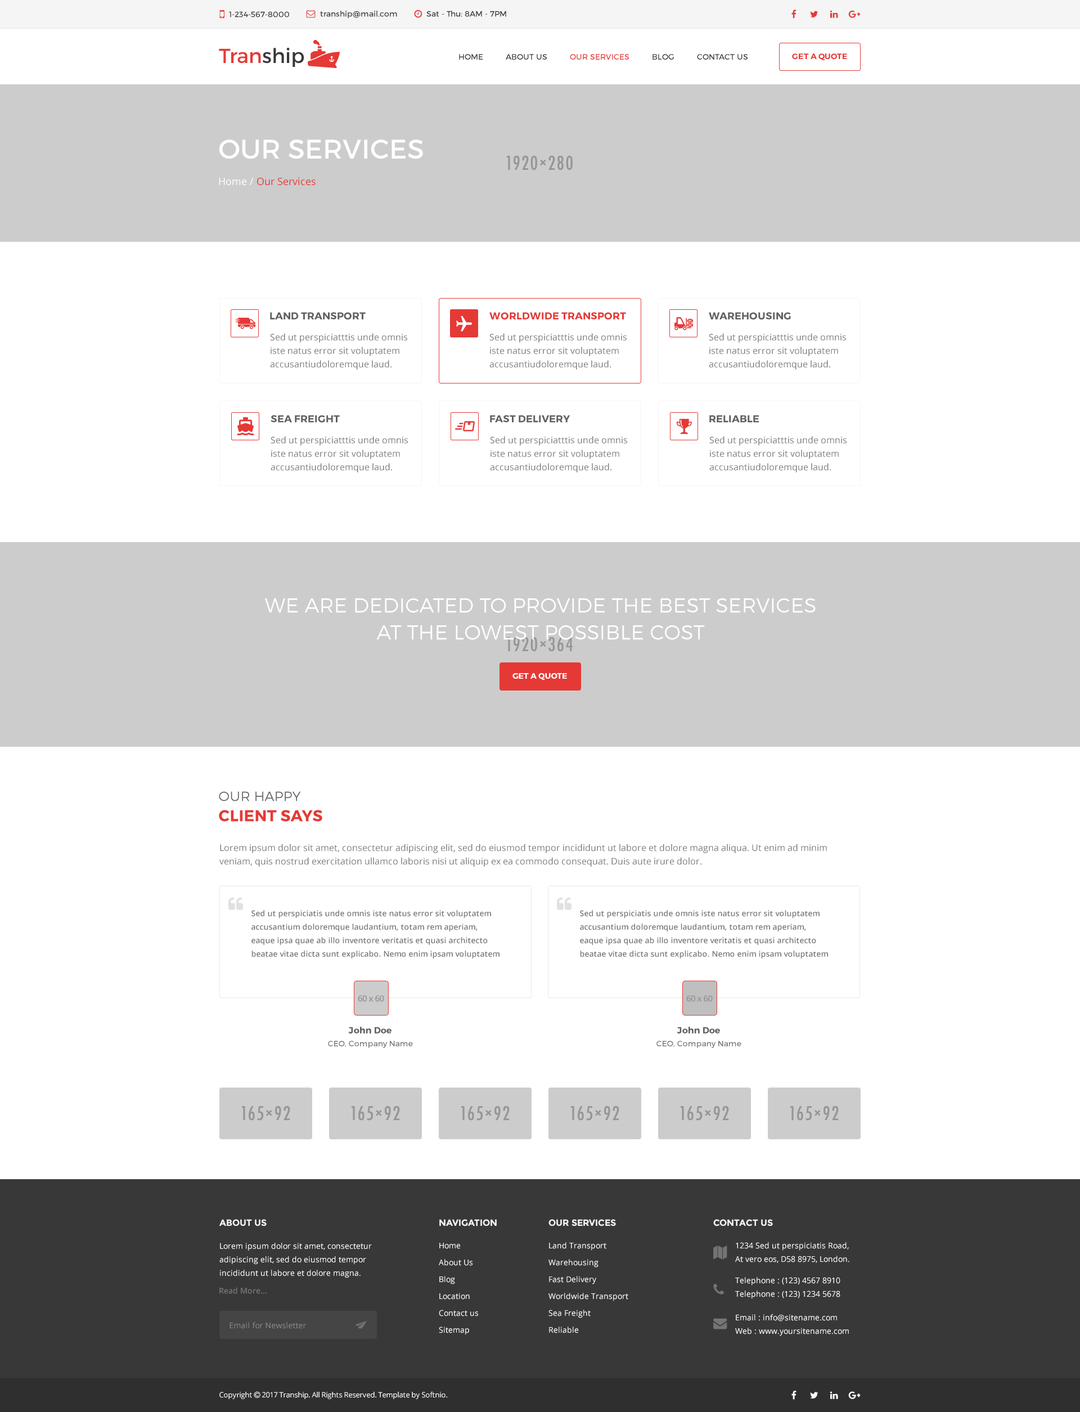
<style>
.page{position:relative;width:1080px;height:1412px;background:#ffffff}
.page>*{position:absolute;margin:0}
.t1{font:7.9px "Montserrat-Regular";color:#383838}
.t2{font:20.2px "Montserrat-Regular";color:#e53935}
.t3{font:20.2px "Montserrat-Regular";color:#383838}
.t4{font:7.9px "Montserrat-Regular";color:#383838;text-transform:uppercase}
.t5{font:7.9px "Montserrat-Regular";color:#e53935;text-transform:uppercase}
.t6{font:7.9px "Montserrat-Bold";color:#e53935;text-transform:uppercase}
.t7{font:27px "Montserrat-Regular";color:#ffffff;text-transform:uppercase}
.t8{font:10.1px "OpenSans";color:#e53935}
.t9{font:10.1px "OpenSans";color:#ffffff}
.t10{font:10.1px "Montserrat-Bold";color:#616161;text-transform:uppercase}
.t11{font:10.1px "Montserrat-Bold";color:#e53935;text-transform:uppercase}
.t12{font:9px/13.5px "OpenSans";color:#777777}
.t13{font:20.2px/27px "Montserrat-Light";color:#ffffff;text-transform:uppercase}
.t14{font:7.9px "Montserrat-Bold";color:#ffffff;text-transform:uppercase}
.t15{font:15.8px/20.2px "Montserrat-Bold";color:#e53935;text-transform:uppercase}
.t16{font:13.5px/20.2px "Montserrat-Light";color:#616161;text-transform:uppercase}
.t17{font:7.9px/13.5px "OpenSans-Semibold";color:#777777}
.t18{font:8.4px "OpenSans-Semibold";letter-spacing:-0.05em;color:#969696}
.t19{font:9px "Montserrat-Bold";color:#616161}
.t20{font:7.9px "Montserrat-Regular";color:#777777}
.t21{font:9px "Montserrat-Bold";color:#f4f4f4;text-transform:uppercase}
.t22{font:7.9px/13.5px "OpenSans";color:#ffffff}
.t23{font:7.9px/16.9px "OpenSans";color:#ffffff}
.t24{font:7.9px "OpenSans-Semibold";color:#747474}
.t25{font:7.9px "OpenSans";color:#888888}
</style>
<div class="page">
<p class="t1" style="left:229px;top:11px;width:60px;height:6px">1-234-567-8000</p>
<p class="t1" style="left:320px;top:11px;width:77px;height:8px">tranship@mail.com</p>
<p class="t1" style="left:426px;top:11px;width:80px;height:6px">Sat - Thu: 8AM - 7PM</p>
<p class="t2" style="left:219px;top:47px;width:85px;height:20px">Tran<span class="t3">ship</span></p>
<p class="t4" style="left:459px;top:54px;width:289px;height:6px">Home          About Us          <span class="t5">Our Services</span>          blog          contact us</p>
<p class="t6" style="left:792px;top:53px;width:55px;height:8px">get a quote</p>
<p class="t7" style="left:219px;top:140px;width:204px;height:19px">our services</p>
<p class="t8" style="left:219px;top:177px;width:97px;height:9px"><span class="t9">Home / </span>Our Services</p>
<p class="t10" style="left:270px;top:312px;width:96px;height:8px">Land transport</p>
<p class="t11" style="left:489px;top:312px;width:137px;height:8px">Worldwide transport</p>
<p class="t10" style="left:709px;top:312px;width:82px;height:8px">warehousing</p>
<p class="t12" style="left:270px;top:334px;width:137px;height:36px">Sed ut perspiciatttis unde omnis iste natus error sit voluptatem accusantiudoloremque laud.</p>
<p class="t12" style="left:489px;top:334px;width:138px;height:36px">Sed ut perspiciatttis unde omnis iste natus error sit voluptatem accusantiudoloremque laud.</p>
<p class="t12" style="left:709px;top:334px;width:137px;height:36px">Sed ut perspiciatttis unde omnis iste natus error sit voluptatem accusantiudoloremque laud.</p>
<p class="t10" style="left:271px;top:415px;width:69px;height:8px">Sea freight</p>
<p class="t10" style="left:490px;top:415px;width:80px;height:7px">fast delivery</p>
<p class="t10" style="left:709px;top:415px;width:50px;height:7px">Reliable</p>
<p class="t12" style="left:271px;top:436px;width:137px;height:36px">Sed ut perspiciatttis unde omnis iste natus error sit voluptatem accusantiudoloremque laud.</p>
<p class="t12" style="left:490px;top:436px;width:137px;height:36px">Sed ut perspiciatttis unde omnis iste natus error sit voluptatem accusantiudoloremque laud.</p>
<p class="t12" style="left:709px;top:436px;width:138px;height:36px">Sed ut perspiciatttis unde omnis iste natus error sit voluptatem accusantiudoloremque laud.</p>
<p class="t13" style="left:264px;top:598px;width:552px;height:42px;text-align:center">we are dedicated to provide the best services<br>at the lowest possible cost</p>
<p class="t14" style="left:512px;top:673px;width:55px;height:7px">get a quote</p>
<p class="t15" style="left:219px;top:791px;width:103px;height:31px"><span class="t16">Our Happy <br></span>Client Says</p>
<p class="t12" style="left:219px;top:844px;width:608px;height:23px">Lorem ipsum dolor sit amet, consectetur adipiscing elit, sed do eiusmod tempor incididunt ut labore et dolore magna aliqua. Ut enim ad minim veniam, quis nostrud exercitation ullamco laboris nisi ut aliquip ex ea commodo consequat. Duis aute irure dolor.</p>
<p class="t17" style="left:251px;top:910px;width:249px;height:49px">Sed ut perspiciatis unde omnis iste natus error sit voluptatem accusantium doloremque laudantium, totam rem aperiam, eaque ipsa quae ab illo inventore veritatis et quasi architecto beatae vitae dicta sunt explicabo. Nemo enim ipsam voluptatem quia voluptas sit aspernatur aut odit aut fugit, sed quia consequuntur magni dolores eos qui ratione voluptatem sequi nesciunt.</p>
<p class="t17" style="left:580px;top:910px;width:248px;height:49px">Sed ut perspiciatis unde omnis iste natus error sit voluptatem accusantium doloremque laudantium, totam rem aperiam, eaque ipsa quae ab illo inventore veritatis et quasi architecto beatae vitae dicta sunt explicabo. Nemo enim ipsam voluptatem quia voluptas sit aspernatur aut odit aut fugit, sed quia consequuntur magni dolores eos qui ratione voluptatem sequi nesciunt.</p>
<p class="t18" style="left:358px;top:996px;width:26px;height:6px">60 x 60</p>
<p class="t18" style="left:686px;top:996px;width:27px;height:6px">60 x 60</p>
<p class="t19" style="left:348px;top:1027px;width:44px;height:7px">John Doe</p>
<p class="t19" style="left:677px;top:1027px;width:43px;height:7px">John Doe</p>
<p class="t20" style="left:328px;top:1041px;width:85px;height:7px">CEO, Company Name</p>
<p class="t20" style="left:656px;top:1041px;width:85px;height:7px">CEO, Company Name</p>
<p class="t21" style="left:219px;top:1220px;width:48px;height:7px">about us</p>
<p class="t21" style="left:439px;top:1220px;width:58px;height:7px">navigation</p>
<p class="t21" style="left:548px;top:1220px;width:68px;height:7px">our services</p>
<p class="t21" style="left:713px;top:1220px;width:60px;height:7px">contact us</p>
<p class="t22" style="left:219px;top:1243px;width:153px;height:35px">Lorem ipsum dolor sit amet, consectetur adipiscing elit, sed do eiusmod tempor incididunt ut labore et dolore magna.</p>
<p class="t23" style="left:439px;top:1243px;width:39px;height:92px">Home<br>About Us<br>Blog<br>Location<br>Contact us<br>Sitemap</p>
<p class="t23" style="left:548px;top:1243px;width:80px;height:91px">Land Transport<br>Warehousing<br>Fast Delivery <br>Worldwide Transport<br>Sea Freight<br>Reliable</p>
<p class="t22" style="left:735px;top:1243px;width:114px;height:20px">1234 Sed ut perspiciatis Road,<br>At vero eos, D58 8975, London.</p>
<p class="t22" style="left:735px;top:1277px;width:105px;height:22px">Telephone : (123) 4567 8910<br>Telephone : (123) 1234 5678</p>
<p class="t24" style="left:219px;top:1288px;width:48px;height:6px">Read More...</p>
<p class="t25" style="left:230px;top:1322px;width:76px;height:7px">Email for Newsletter</p>
<p class="t22" style="left:735px;top:1315px;width:114px;height:21px">Email : info@sitename.com<br>Web : www.yoursitename.com</p>
</div>
